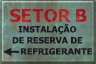
<style>
.page{position:relative;width:96px;height:64px}
.page>*{position:absolute;margin:0}
.t1{font:8.5px/11px "Verdana-Bold";letter-spacing:-0.02em;color:#211821;text-transform:uppercase;scale:0.96 1}
.t2{font:8.5px "Verdana-Bold";letter-spacing:-0.02em;color:#211821;text-transform:uppercase}
</style>
<div class="page">
<p class="t1" style="left:12px;top:24px;width:71px;height:20px;text-align:center">instalação<br>de reserva de</p>
<p class="t2" style="left:21px;top:48px;width:71px;height:7px">refrigerante</p>
</div>
